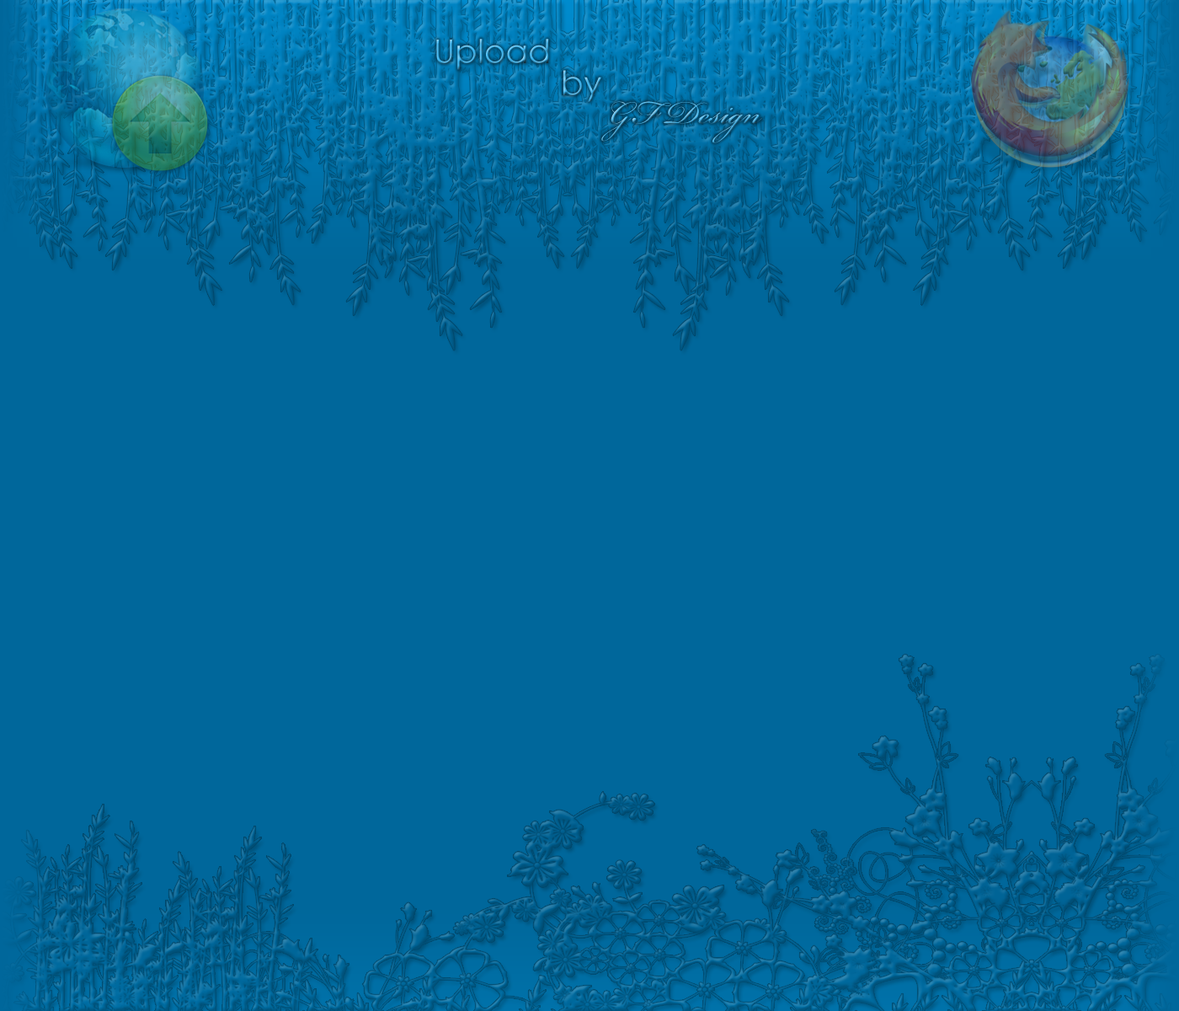
<style>
.page{position:relative;width:1179px;height:1011px;background:#00679b}
.page>*{position:absolute;margin:0}
.t1{font:32.9px "CenturyGothic"}
.t2{font:33.7px "CenturyGothic"}
.t3{font:49.7px "BickhamScriptPro-Regular"}
</style>
<div class="page">
<p class="t1" style="left:436px;top:39px;width:113px;height:31px">Upload</p>
<p class="t2" style="left:564px;top:70px;width:38px;height:32px">by</p>
<p class="t3" style="left:602px;top:101px;width:160px;height:42px">GF Design</p>
</div>
